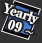
<style>
.page{position:relative;width:42px;height:43px;background:#333333}
.page>*{position:absolute;margin:0}
.t1{font:13px/14px "RyuminPro-ExBold";letter-spacing:-0.08em;color:#ffffff;font-weight:bold}
.t2{font:13px/14px "RyuminPro-ExBold";color:#ffffff;font-weight:bold}
.t3{font:13px/14px "TimesNewRomanPSMT";color:#ffffff;font-weight:bold}
</style>
<div class="page">
<p class="t1" style="left:3px;top:2px;width:36px;height:32px;text-align:center;rotate:19deg">Yearly<br><span class="t2">  09 </span><span class="t3">~</span></p>
</div>
